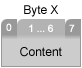
<style>
.page{position:relative;width:82px;height:68px;background:#cccccc}
.page>*{position:absolute;margin:0}
.t1{font:12px "ArialMT";color:#000000}
.t2{font:10px "ArialMT";color:#ffffff}
</style>
<div class="page">
<p class="t1" style="left:24px;top:5px;width:35px;height:12px">Byte X</p>
<p class="t2" style="left:6px;top:23px;width:6px;height:8px">0</p>
<p class="t2" style="left:29px;top:24px;width:24px;height:8px">1 ... 6</p>
<p class="t2" style="left:69px;top:24px;width:6px;height:8px">7</p>
<p class="t1" style="left:20px;top:47px;width:42px;height:10px">Content</p>
</div>
